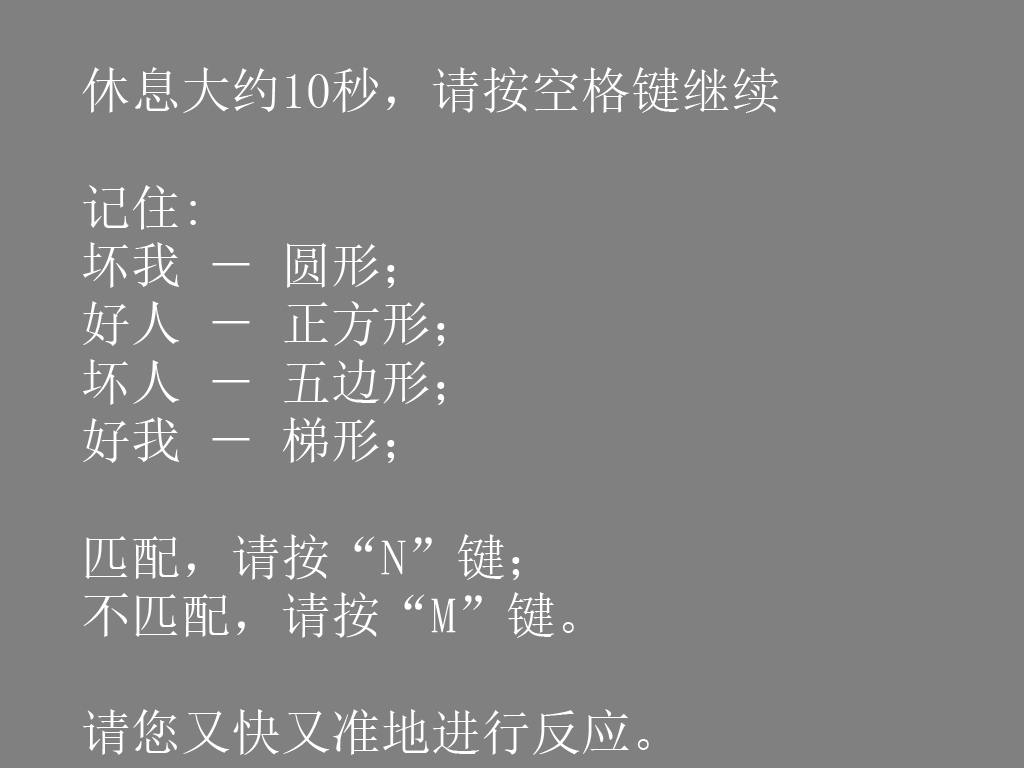
<style>
.page{position:relative;width:1024px;height:768px;background:#808080}
.page>*{position:absolute;margin:0}
.t1{font:50px/58.3px "SimSun";color:#ffffff}
</style>
<div class="page">
<p class="t1" style="left:82px;top:67px;width:697px;height:688px">休息大约10秒，请按空格键继续<br><br>记住:<br>坏我 － 圆形； <br>好人 － 正方形；<br>坏人 － 五边形；<br>好我 － 梯形；<br><br>匹配，请按“N”键；<br>不匹配，请按“M”键。<br><br>请您又快又准地进行反应。</p>
</div>
